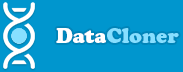
<style>
.page{position:relative;width:183px;height:72px;background:#0096ce}
.page>*{position:absolute;margin:0}
.t1{font:20px "CooperBlackStd";color:#87dfff}
.t2{font:20px "CooperBlackStd";color:#ffffff}
</style>
<div class="page">
<p class="t1" style="left:56px;top:28px;width:123px;height:15px"><span class="t2">Data</span>Cloner</p>
</div>
